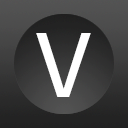
<style>
.page{position:relative;width:128px;height:128px}
.page>*{position:absolute;margin:0}
.t1{font:100px "Consolas";color:#ffffff}
</style>
<div class="page">
<p class="t1" style="left:36px;top:33px;width:55px;height:64px">V</p>
</div>
